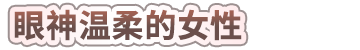
<style>
.page{position:relative;width:360px;height:50px;background:#ffffff}
.page>*{position:absolute;margin:0}
.t1{font:32px "SourceHanSansSC-Bold";color:#73534d;font-weight:bold}
</style>
<div class="page">
<p class="t1" style="left:14px;top:9px;width:228px;height:32px">眼神温柔的女性</p>
</div>
